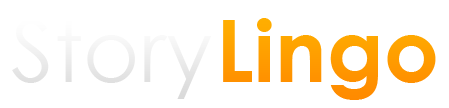
<style>
.page{position:relative;width:449px;height:108px;background:#ffffff}
.page>*{position:absolute;margin:0}
.t1{font:86.5px "CenturyGothic";color:#eeeeee}
.t2{font:86.5px "CenturyGothic-Bold";color:#ff9b00}
</style>
<div class="page">
<p class="t1" style="left:12px;top:19px;width:200px;height:80px">Story</p>
<p class="t2" style="left:223px;top:18px;width:213px;height:82px">Lingo</p>
</div>
